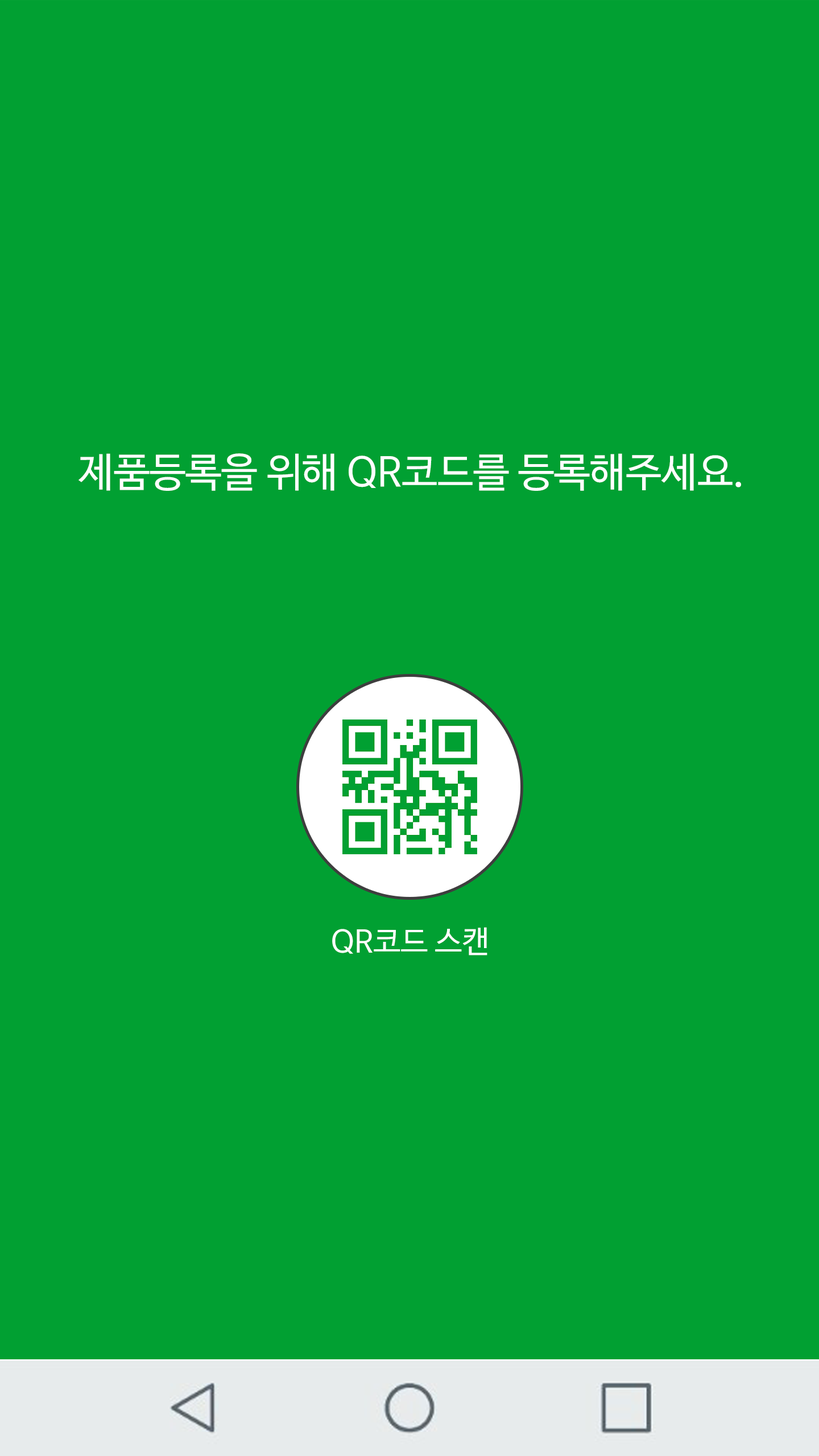
<style>
.page{position:relative;width:819px;height:1456px;background:#01a032}
.page>*{position:absolute;margin:0}
.t1{font:40.3px "NanumBarunGothicOTF";color:#ffffff}
.t2{font:30.8px "NanumBarunGothicOTF";color:#ffffff}
</style>
<div class="page">
<p class="t1" style="left:78px;top:453px;width:663px;height:38px">제품등록을 위해 QR코드를 등록해주세요.</p>
<p class="t2" style="left:332px;top:927px;width:155px;height:28px">QR코드 스캔</p>
</div>
